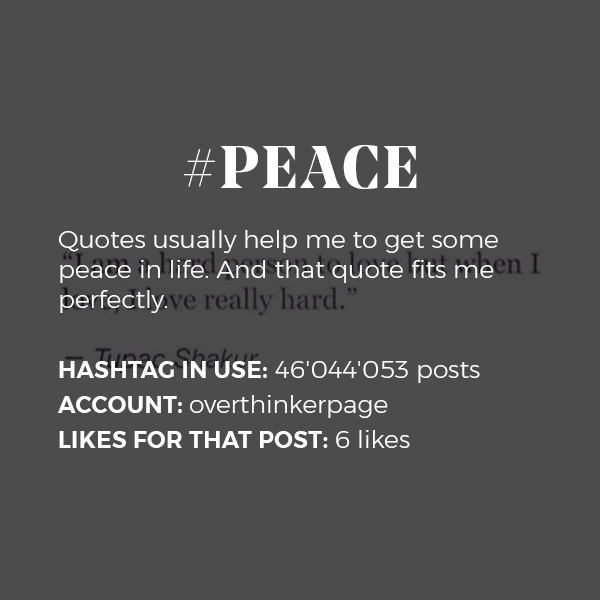
<style>
.page{position:relative;width:600px;height:600px;background:#4c4c4c}
.page>*{position:absolute;margin:0}
.t1{font:25px "Montserrat-Light";color:#ffffff}
.t2{font:60px "NoeDisplay-Bold";letter-spacing:0.05em;color:#ffffff;text-transform:uppercase}
.t3{font:23px/35px "Montserrat-SemiBold";letter-spacing:0.02em;color:#ffffff;text-transform:uppercase}
.t4{font:25px/35px "Montserrat-Light";color:#ffffff}
</style>
<div class="page">
<p class="t1" style="left:57px;top:145px;width:441px;height:303px;text-align:center"><span class="t2">#Peace<br></span><br>Quotes usually help me to get some peace in life. And that quote fits me perfectly.<br><br><span class="t3">Hashtag in use:</span><span class="t4"> 46'044'053 posts<br></span><span class="t3">ACCOUNT: </span><span class="t4">overthinkerpage<br></span><span class="t3">Likes for that post: </span><span class="t4">6 likes</span></p>
</div>
